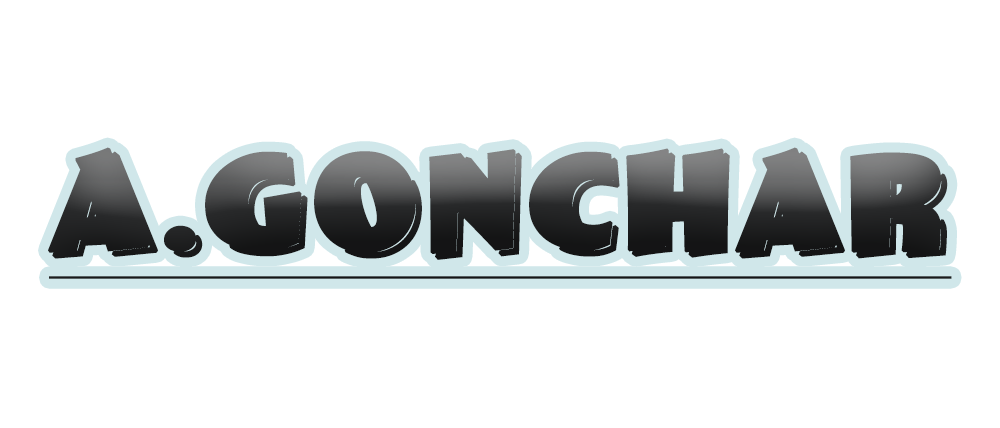
<style>
.page{position:relative;width:1000px;height:428px;background:#ffffff}
.page>*{position:absolute;margin:0}
.t1{font:125px "WigwagW01-Deluxe";letter-spacing:0.005em;text-transform:uppercase;font-weight:bold;text-decoration:underline}
</style>
<div class="page">
<p class="t1" style="left:48px;top:147px;width:904px;height:132px">A.Gonchar</p>
</div>
